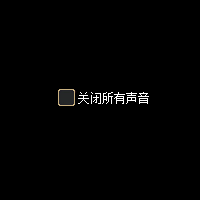
<style>
.page{position:relative;width:200px;height:200px;background:#000000}
.page>*{position:absolute;margin:0}
.t1{font:12px "SimSun";color:#ffffff}
</style>
<div class="page">
<p class="t1" style="left:78px;top:92px;width:71px;height:12px">关闭所有声音</p>
</div>
